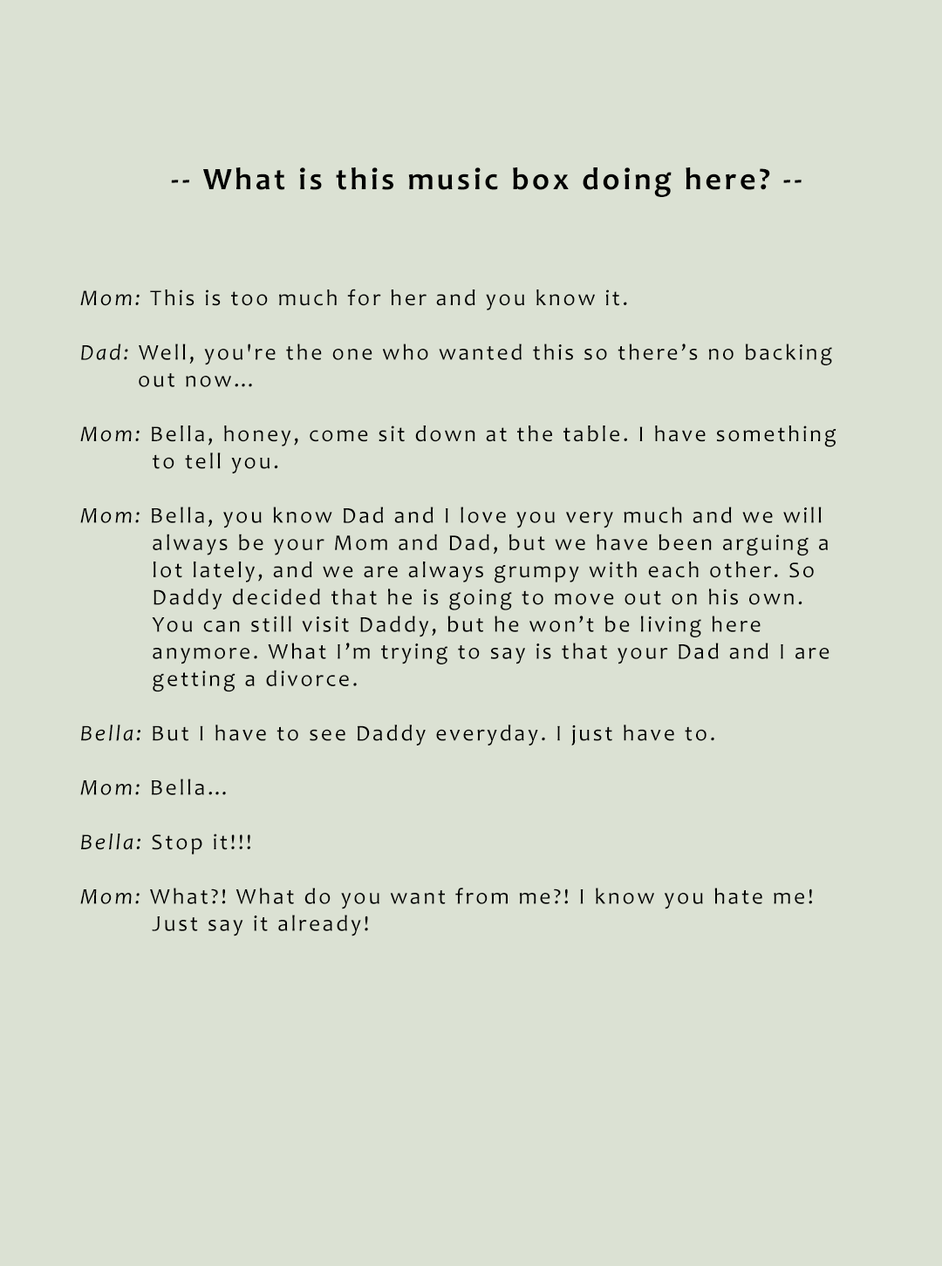
<style>
.page{position:relative;width:942px;height:1266px;background:#dbe1d3}
.page>*{position:absolute;margin:0}
.t1{font:31.4px "Candara-Bold";letter-spacing:0.1em;color:#000000}
.t2{font:22.7px "Candara";letter-spacing:0.1em;color:#000000}
.t3{font:22.7px "Candara-Italic";letter-spacing:0.1em;color:#000000}
</style>
<div class="page">
<p class="t1" style="left:171px;top:167px;width:630px;height:30px">-- What is this music box doing here? --</p>
<p class="t2" style="left:80px;top:289px;width:756px;height:648px"><span class="t3">Mom: </span>This is too much for her and you know it.<br><span class="t3"><br>Dad: </span>Well, you're the one who wanted this so there’s no backing <br>        out now…<br><span class="t3"><br>Mom: </span>Bella, honey, come sit down at the table. I have something <br>          to tell you.<br><span class="t3"><br>Mom: </span>Bella, you know Dad and I love you very much and we will <br>          always be your Mom and Dad, but we have been arguing a <br>          lot lately, and we are always grumpy with each other. So <br>          Daddy decided that he is going to move out on his own. <br>          You can still visit Daddy, but he won’t be living here <br>          anymore. What I’m trying to say is that your Dad and I are <br>          getting a divorce.<br><span class="t3"><br>Bella: </span>But I have to see Daddy everyday. I just have to.<br><span class="t3"><br>Mom: </span>Bella…<br><span class="t3"><br>Bella:</span> Stop it!!!<br><span class="t3"><br>Mom: </span>What?! What do you want from me?! I know you hate me! <br>          Just say it already!</p>
</div>
